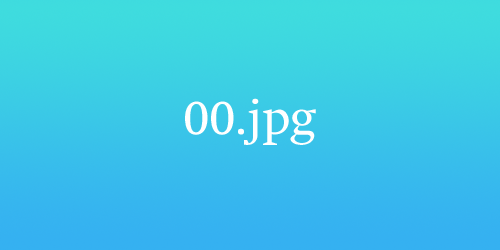
<style>
.page{position:relative;width:500px;height:250px}
.page>*{position:absolute;margin:0}
.t1{font:48px "Swift-Regular";color:#ffffff}
</style>
<div class="page">
<p class="t1" style="left:185px;top:98px;width:131px;height:47px">00.jpg</p>
</div>
